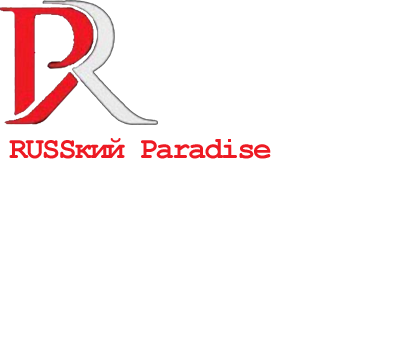
<style>
.page{position:relative;width:400px;height:350px;background:#ffffff}
.page>*{position:absolute;margin:0}
.t1{font:31px "CourierNewPS-BoldMT";letter-spacing:-0.075em;color:#ed1a23}
</style>
<div class="page">
<p class="t1" style="left:9px;top:138px;width:262px;height:21px">RUSSкий Paradise</p>
</div>
